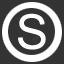
<style>
.page{position:relative;width:64px;height:64px;background:#333333}
.page>*{position:absolute;margin:0}
.t1{font:48px "ArialMT";letter-spacing:-0.01em;color:#ffffff}
</style>
<div class="page">
<p class="t1" style="left:18px;top:13px;width:28px;height:37px">S</p>
</div>
